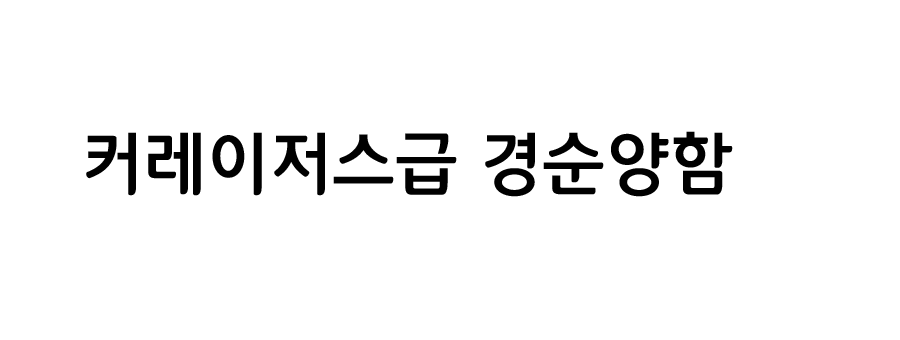
<style>
.page{position:relative;width:900px;height:340px;background:#ffffff}
.page>*{position:absolute;margin:0}
.t1{font:70px "12LotteMartDreamBold";color:#000000}
</style>
<div class="page">
<p class="t1" style="left:86px;top:131px;width:647px;height:66px">커레이저스급 경순양함</p>
</div>
